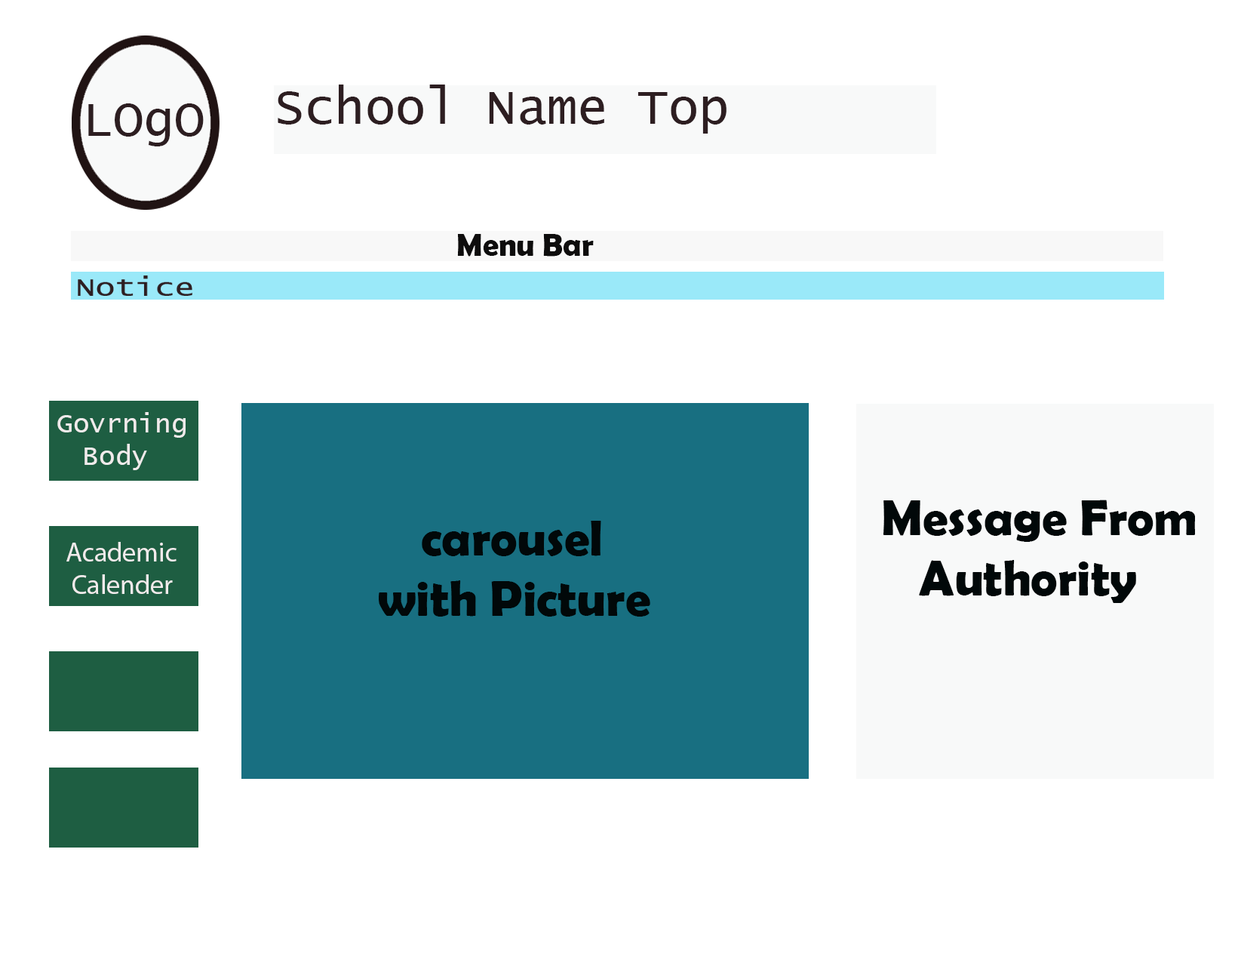
<style>
.page{position:relative;width:1238px;height:963px;background:#ffffff}
.page>*{position:absolute;margin:0}
.t1{font:50.4px "LucidaConsole";color:#2d1e21}
.t2{font:31.7px "BerlinSansFBDemi-Bold";color:#0e0d0d}
.t3{font:27.2px "LucidaConsole";color:#f0ebeb}
.t4{font:27.2px "BerlinSansFBDemi-Bold";color:#f0ebeb}
.t5{font:50.4px "BerlinSansFBDemi-Bold";color:#010809}
.t6{font:50.4px "LucidaConsole";color:#010809}
.t7{font:27.2px "MyriadPro-Regular";color:#f0ebeb}
</style>
<div class="page">
<p class="t1" style="left:278px;top:85px;width:449px;height:49px">School Name Top</p>
<p class="t1" style="left:88px;top:103px;width:116px;height:43px">LOgO</p>
<p class="t2" style="left:457px;top:234px;width:137px;height:23px">Menu Bar</p>
<p class="t3" style="left:57px;top:412px;width:129px;height:58px"><span class="t4"> </span>Govrning <br>  Body</p>
<p class="t5" style="left:884px;top:500px;width:311px;height:103px">Message From<br>    Authority</p>
<p class="t5" style="left:379px;top:521px;width:271px;height:96px"><span class="t6">  </span>carousel<br>with Picture</p>
<p class="t7" style="left:66px;top:542px;width:111px;height:52px">Academic<br> Calender</p>
</div>
